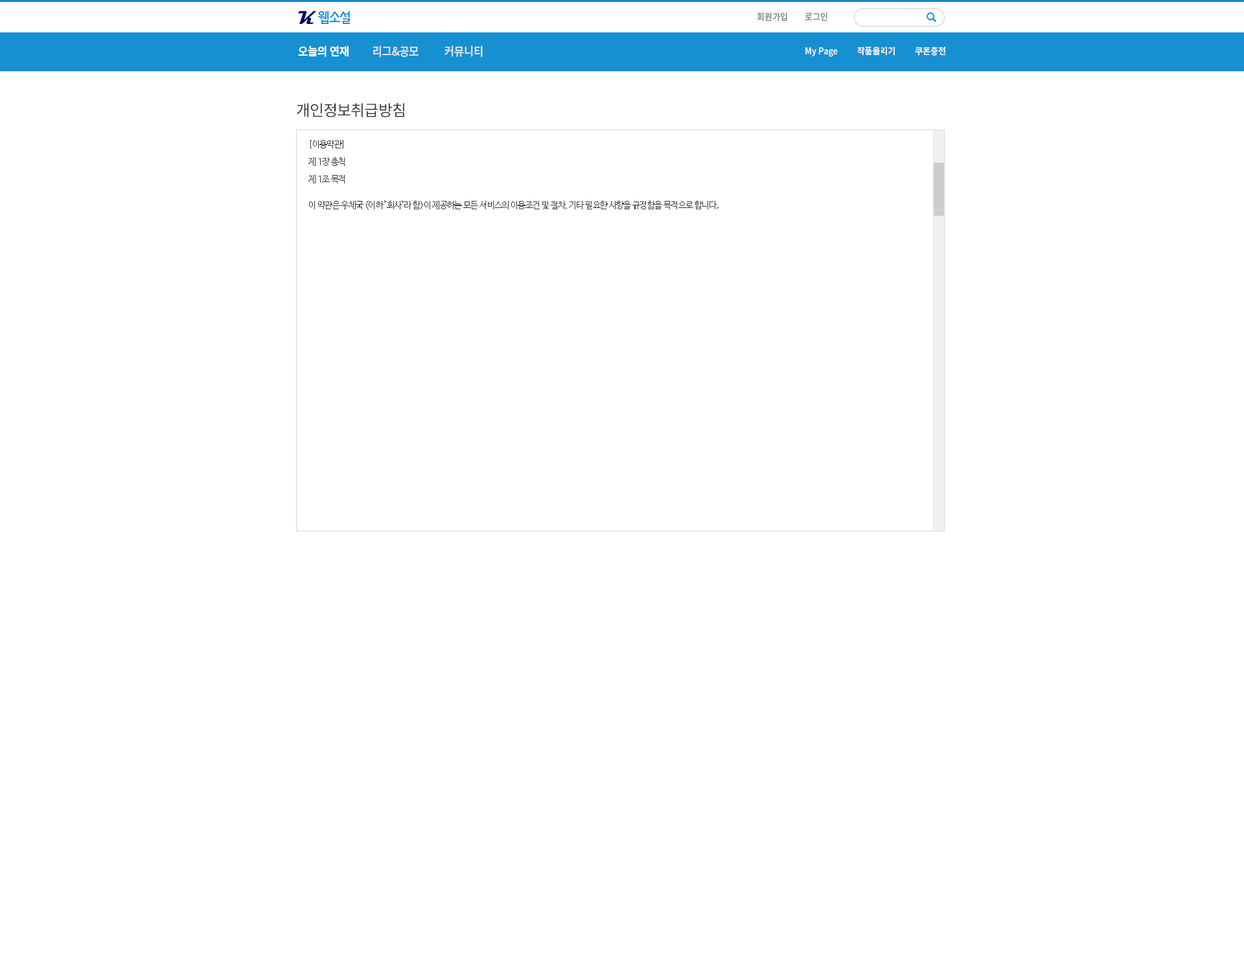
<style>
.page{position:relative;width:1244px;height:959px;background:#ffffff}
.page>*{position:absolute;margin:0}
.t1{font:9.1px "NotoSansCJKkr-Regular";letter-spacing:-0.002em;color:#727272;scale:0.92 1}
.t2{font:11.7px "NotoSansCJKkr-Bold";letter-spacing:-0.002em;color:#dddddd;scale:0.92 1}
.t3{font:11.7px "NotoSansCJKkr-Bold";letter-spacing:-0.002em;color:#ffffff;scale:0.92 1}
.t4{font:9.1px "NotoSansCJKkr-Bold";letter-spacing:-0.002em;color:#ececec;scale:0.92 1}
.t5{font:15.5px "NotoSansCJKkr-Regular";color:#2b2c2f;text-transform:uppercase}
.t6{font:9.1px/25.9px "NanumBarunGothicOTF";letter-spacing:-0.04em;color:#373535;scale:0.95 1}
.t7{font:9.1px/5.8px "NanumBarunGothicOTF";letter-spacing:-0.04em;color:#373535;scale:0.95 1}
</style>
<div class="page">
<p class="t1" style="left:757px;top:12px;width:30px;height:9px">회원가입</p>
<p class="t1" style="left:805px;top:12px;width:22px;height:9px">로그인</p>
<p class="t2" style="left:298px;top:45px;width:185px;height:12px"><span class="t3">오늘의 연재         </span>리그&amp;공모          커뮤니티</p>
<p class="t4" style="left:805px;top:46px;width:141px;height:11px">My Page          작품올리기          쿠폰충전</p>
<p class="t5" style="left:297px;top:103px;width:107px;height:14px">개인정보취급방침</p>
<p class="t6" style="left:308px;top:140px;width:410px;height:70px"><span class="t7">[이용약관]<br><br><br>제 1장 총칙<br><br><br>제 1조 목적</span><br>이 약관은 우체국 (이하 "회사"라 함)이 제공하는 모든 서비스의 이용조건 및 절차, 기타 필요한 사항을 규정함을 목적으로 합니다.<br><br>제 1장 총칙<br><br>제 1조 목적<br><br>이 약관은 ㈜브리타니산업개발 (이하 "회사"라 함)이 제공하는 모든 서비스의 이용조건 및 절차, 기타 필요한 사항을 규정함을 목적으로 합니다.</p>
</div>
